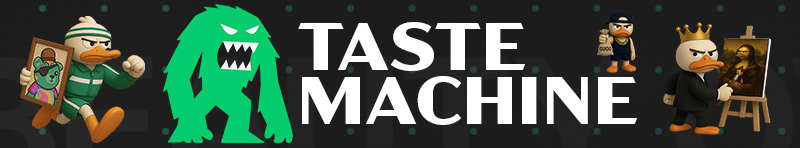
<style>
.page{position:relative;width:800px;height:148px;background:#1d1d1d}
.page>*{position:absolute;margin:0}
.t1{font:66.7px/54.2px "AcmeGothic-WideBold";color:#ffffff;scale:1.04 1}
</style>
<div class="page">
<p class="t1" style="left:298px;top:22px;width:339px;height:103px">TASTE<br>MACHINE</p>
</div>
